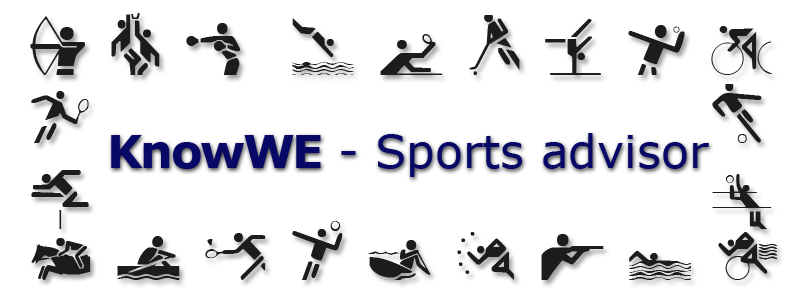
<style>
.page{position:relative;width:800px;height:300px;background:#ffffff}
.page>*{position:absolute;margin:0}
.t1{font:46px "Verdana";color:#080866}
.t2{font:46px "Verdana-Bold";letter-spacing:-0.05em;color:#080866}
</style>
<div class="page">
<p class="t1" style="left:111px;top:133px;width:598px;height:44px"><span class="t2">KnowWE</span> - Sports advisor</p>
</div>
